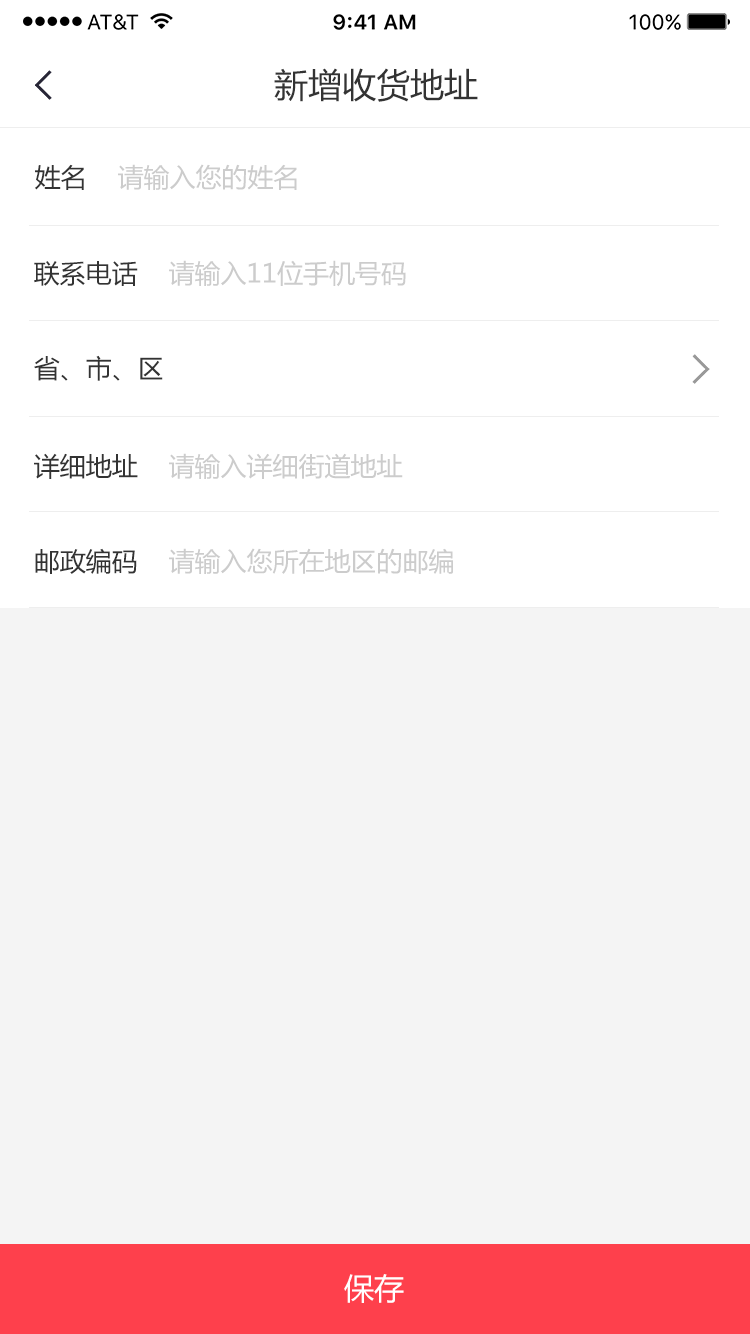
<style>
.page{position:relative;width:750px;height:1334px;background:#f4f4f4}
.page>*{position:absolute;margin:0}
.t1{font:34px "MicrosoftYaHei";color:#333333}
.t2{font:26px "MicrosoftYaHei";color:#cccccc}
.t3{font:26px "MicrosoftYaHei";color:#333333}
.t4{font:30px "MicrosoftYaHei";color:#ffffff}
</style>
<div class="page">
<p class="t1" style="left:274px;top:68px;width:204px;height:34px">新增收货地址</p>
<p class="t2" style="left:35px;top:164px;width:262px;height:26px"><span class="t3">姓名    </span>请输入您的姓名</p>
<p class="t2" style="left:34px;top:260px;width:372px;height:27px"><span class="t3">联系电话    </span>请输入11位手机号码</p>
<p class="t3" style="left:34px;top:355px;width:129px;height:26px">省、市、区</p>
<p class="t2" style="left:34px;top:453px;width:369px;height:26px"><span class="t3">详细地址    </span>请输入详细街道地址</p>
<p class="t2" style="left:35px;top:548px;width:418px;height:26px"><span class="t3">邮政编码    </span>请输入您所在地区的邮编</p>
<p class="t4" style="left:344px;top:1274px;width:60px;height:29px">保存</p>
</div>
